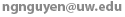
<style>
.page{position:relative;width:125px;height:17px;background:#ffffff}
.page>*{position:absolute;margin:0}
.t1{font:14px "MyriadPro-Bold";color:#888888}
</style>
<div class="page">
<p class="t1" style="left:2px;top:1px;width:120px;height:13px">ngnguyen@uw.edu</p>
</div>
